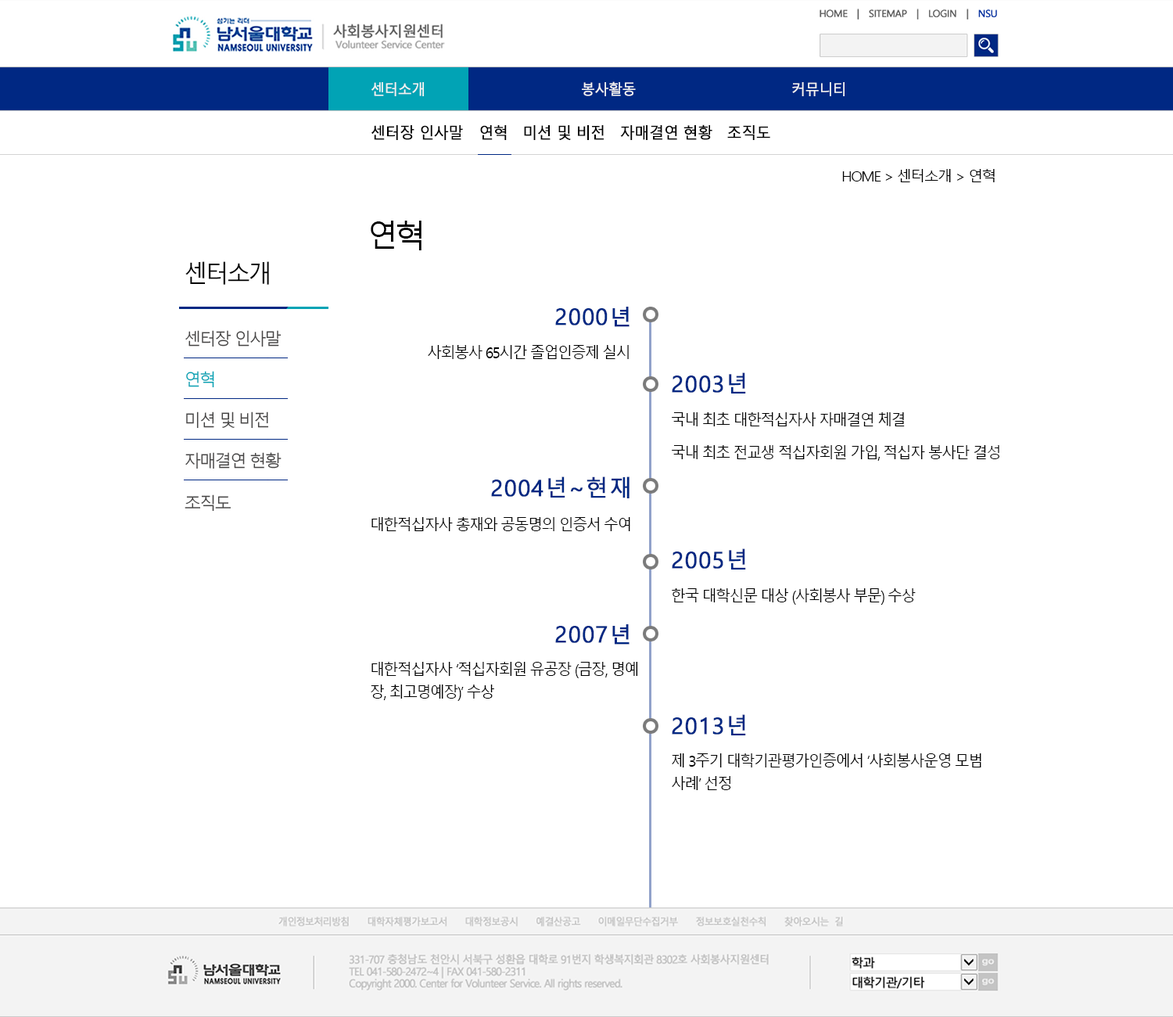
<style>
.page{position:relative;width:1173px;height:1017px;background:#ffffff}
.page>*{position:absolute;margin:0}
.t1{font:14.6px "MalgunGothicRegular";letter-spacing:-0.05em;color:#f3f3f3;font-weight:bold;scale:0.95 1}
.t2{font:15.6px "MalgunGothicRegular";letter-spacing:-0.05em;color:#000000;font-weight:bold;scale:0.95 1}
.t3{font:14.4px "MalgunGothicRegular";letter-spacing:-0.1em;color:#000000;scale:1.05 1}
.t4{font:31.3px "MalgunGothicRegular";letter-spacing:-0.1em;color:#000000}
.t5{font:24.3px "MalgunGothicRegular";letter-spacing:-0.1em;color:#000000}
.t6{font:22.5px "MalgunGothicRegular";letter-spacing:0.025em;color:#002883;font-weight:bold}
.t7{font:21.3px "MalgunGothicRegular";letter-spacing:-0.1em;color:#002883;font-weight:bold;scale:1.06 1}
.t8{font:16.8px "MalgunGothicRegular";letter-spacing:-0.1em;color:#454444}
.t9{font:16px "MalgunGothicRegular";letter-spacing:-0.1em;color:#000000;scale:0.95 1}
.t10{font:16.8px "MalgunGothicRegular";letter-spacing:-0.1em;color:#01a3b5}
.t11{font:16px/22.9px "MalgunGothicRegular";letter-spacing:-0.1em;color:#000000;scale:0.95 1}
</style>
<div class="page">
<p class="t1" style="left:371px;top:81px;width:474px;height:15px">센터소개        봉사활동       커뮤니티</p>
<p class="t2" style="left:371px;top:124px;width:399px;height:16px">센터장 인사말  　연혁　미션 및 비전　자매결연 현황　조직도</p>
<p class="t3" style="left:842px;top:169px;width:153px;height:13px">HOME &gt; 센터소개 &gt; 연혁</p>
<p class="t4" style="left:371px;top:221px;width:50px;height:29px">연혁</p>
<p class="t5" style="left:185px;top:261px;width:84px;height:24px">센터소개</p>
<p class="t6" style="left:555px;top:307px;width:74px;height:20px">2000<span class="t7">년</span></p>
<p class="t8" style="left:185px;top:330px;width:97px;height:17px">센터장 인사말</p>
<p class="t9" style="left:428px;top:345px;width:201px;height:14px">사회봉사 65시간 졸업인증제 실시</p>
<p class="t10" style="left:186px;top:371px;width:28px;height:17px">연혁</p>
<p class="t6" style="left:672px;top:372px;width:74px;height:21px">2003년</p>
<p class="t8" style="left:186px;top:411px;width:83px;height:18px">미션 및 비전</p>
<p class="t9" style="left:672px;top:412px;width:233px;height:14px">국내 최초 대한적십자사 자매결연 체결</p>
<p class="t9" style="left:672px;top:445px;width:327px;height:16px">국내 최초 전교생 적십자회원 가입, 적십자 봉사단 결성</p>
<p class="t8" style="left:185px;top:452px;width:97px;height:16px">자매결연 현황</p>
<p class="t6" style="left:491px;top:476px;width:138px;height:22px">2004년~현재</p>
<p class="t8" style="left:185px;top:494px;width:46px;height:17px">조직도</p>
<p class="t9" style="left:371px;top:517px;width:259px;height:14px">대한적십자사 총재와 공동명의 인증서 수여</p>
<p class="t6" style="left:672px;top:548px;width:74px;height:21px">2005년</p>
<p class="t9" style="left:672px;top:588px;width:244px;height:16px">한국 대학신문 대상 (사회봉사 부문) 수상</p>
<p class="t6" style="left:555px;top:624px;width:74px;height:20px">2007<span class="t7">년</span></p>
<p class="t11" style="left:371px;top:662px;width:267px;height:39px">대한적십자사 ‘적십자회원 유공장 (금장, 명예<br>장, 최고명예장)’ 수상</p>
<p class="t6" style="left:672px;top:714px;width:74px;height:21px">2013년</p>
<p class="t11" style="left:672px;top:753px;width:309px;height:37px">제 3주기 대학기관평가인증에서 ‘사회봉사운영 모범<br>사례’ 선정</p>
</div>
